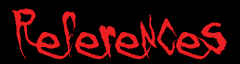
<style>
.page{position:relative;width:240px;height:64px;background:#000000}
.page>*{position:absolute;margin:0}
.t1{font:49.9px "FrankKnows";color:#ed2024}
</style>
<div class="page">
<p class="t1" style="left:11px;top:8px;width:216px;height:52px">References</p>
</div>
